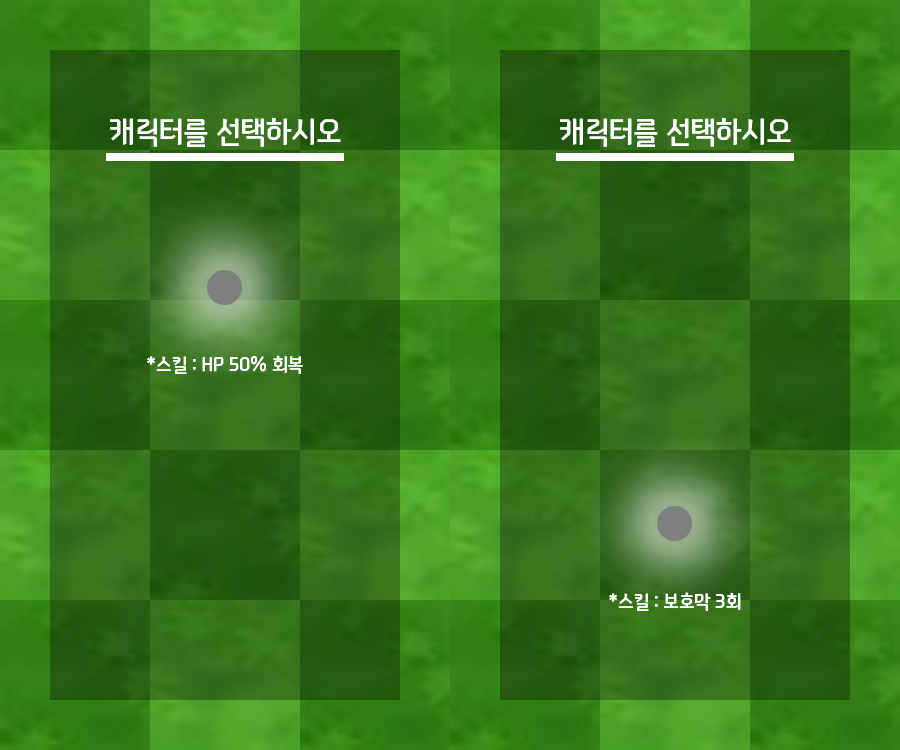
<style>
.page{position:relative;width:900px;height:750px}
.page>*{position:absolute;margin:0}
.t1{font:30.8px "NEXONFootballGothicL";color:#ffffff}
.t2{font:19.2px "NEXONFootballGothicL";color:#ffffff}
</style>
<div class="page">
<p class="t1" style="left:110px;top:117px;width:231px;height:30px">캐릭터를 선택하시오</p>
<p class="t1" style="left:560px;top:117px;width:231px;height:30px">캐릭터를 선택하시오</p>
<p class="t2" style="left:147px;top:355px;width:156px;height:19px">*스킬 : HP 50% 회복</p>
<p class="t2" style="left:609px;top:592px;width:132px;height:19px">*스킬 : 보호막 3회</p>
</div>
